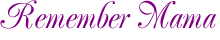
<style>
.page{position:relative;width:220px;height:40px;background:#ffffff}
.page>*{position:absolute;margin:0}
.t1{font:36px "GoetheSkript";color:#800080}
</style>
<div class="page">
<p class="t1" style="left:0px;top:0px;width:216px;height:29px">Remember Mama</p>
</div>
